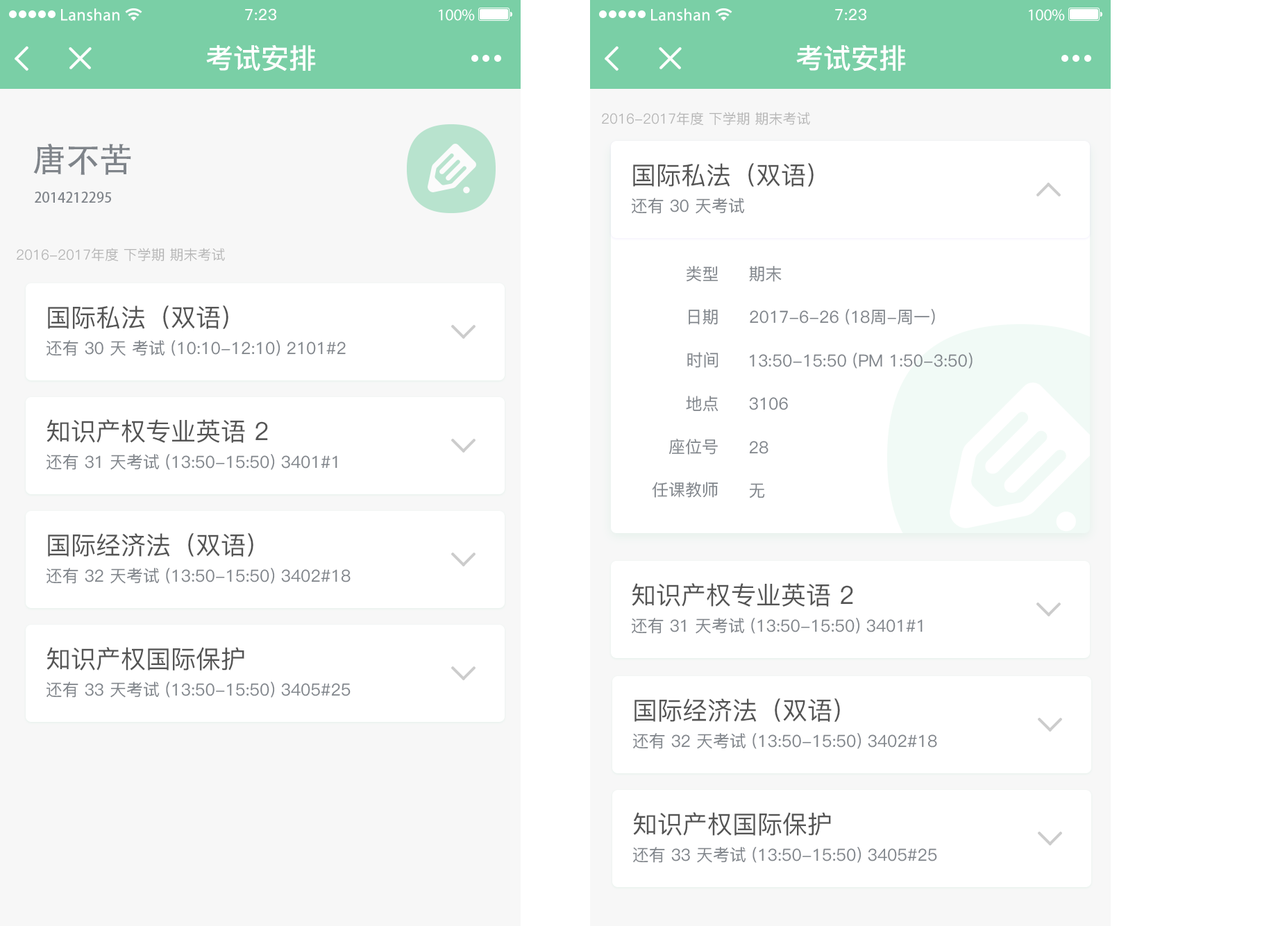
<style>
.page{position:relative;width:1287px;height:926px;background:#ffffff}
.page>*{position:absolute;margin:0}
.t1{font:13.9px "PingFang-SC-Regular";color:#b2b2b2}
.t2{font:33.3px "AdobeHeitiStd-Regular";color:#7f848a}
.t3{font:25px "PingFang-SC-Medium";color:#545454}
.t4{font:13.9px "AdobeHeitiStd-Regular";color:#7f848a}
.t5{font:16.7px "PingFang-SC-Medium";color:#7f848a}
</style>
<div class="page">
<p class="t1" style="left:602px;top:112px;width:208px;height:14px">2016-2017年度 下学期 期末考试</p>
<p class="t2" style="left:33px;top:144px;width:98px;height:31px">唐不苦</p>
<p class="t3" style="left:633px;top:163px;width:181px;height:24px">国际私法（双语）</p>
<p class="t4" style="left:35px;top:192px;width:76px;height:11px">2014212295</p>
<p class="t5" style="left:631px;top:198px;width:114px;height:16px">还有 30 天考试</p>
<p class="t1" style="left:17px;top:248px;width:208px;height:14px">2016-2017年度 下学期 期末考试</p>
<p class="t5" style="left:687px;top:266px;width:31px;height:16px">类型</p>
<p class="t5" style="left:749px;top:266px;width:33px;height:16px">期末</p>
<p class="t3" style="left:48px;top:306px;width:180px;height:23px">国际私法（双语）</p>
<p class="t5" style="left:689px;top:309px;width:29px;height:16px">日期</p>
<p class="t5" style="left:750px;top:309px;width:185px;height:16px">2017-6-26 (18周-周一)</p>
<p class="t5" style="left:46px;top:340px;width:300px;height:16px">还有 30 天 考试 (10:10-12:10) 2101#2</p>
<p class="t5" style="left:687px;top:352px;width:32px;height:16px">时间</p>
<p class="t5" style="left:750px;top:353px;width:223px;height:16px">13:50-15:50 (PM 1:50-3:50)</p>
<p class="t5" style="left:686px;top:396px;width:33px;height:16px">地点</p>
<p class="t5" style="left:749px;top:397px;width:39px;height:13px">3106</p>
<p class="t3" style="left:47px;top:419px;width:221px;height:24px">知识产权专业英语 2</p>
<p class="t5" style="left:669px;top:439px;width:49px;height:16px">座位号</p>
<p class="t5" style="left:749px;top:441px;width:20px;height:13px">28</p>
<p class="t5" style="left:46px;top:454px;width:291px;height:16px">还有 31 天考试 (13:50-15:50) 3401#1</p>
<p class="t5" style="left:652px;top:482px;width:67px;height:16px">任课教师</p>
<p class="t5" style="left:749px;top:483px;width:16px;height:16px">无</p>
<p class="t3" style="left:48px;top:533px;width:205px;height:24px">国际经济法（双语）</p>
<p class="t5" style="left:46px;top:568px;width:305px;height:16px">还有 32 天考试 (13:50-15:50) 3402#18</p>
<p class="t3" style="left:632px;top:583px;width:221px;height:24px">知识产权专业英语 2</p>
<p class="t5" style="left:631px;top:618px;width:292px;height:16px">还有 31 天考试 (13:50-15:50) 3401#1</p>
<p class="t3" style="left:47px;top:647px;width:197px;height:24px">知识产权国际保护</p>
<p class="t5" style="left:46px;top:682px;width:305px;height:16px">还有 33 天考试 (13:50-15:50) 3405#25</p>
<p class="t3" style="left:635px;top:699px;width:205px;height:23px">国际经济法（双语）</p>
<p class="t5" style="left:633px;top:733px;width:304px;height:16px">还有 32 天考试 (13:50-15:50) 3402#18</p>
<p class="t3" style="left:633px;top:812px;width:198px;height:24px">知识产权国际保护</p>
<p class="t5" style="left:633px;top:847px;width:304px;height:16px">还有 33 天考试 (13:50-15:50) 3405#25</p>
</div>
